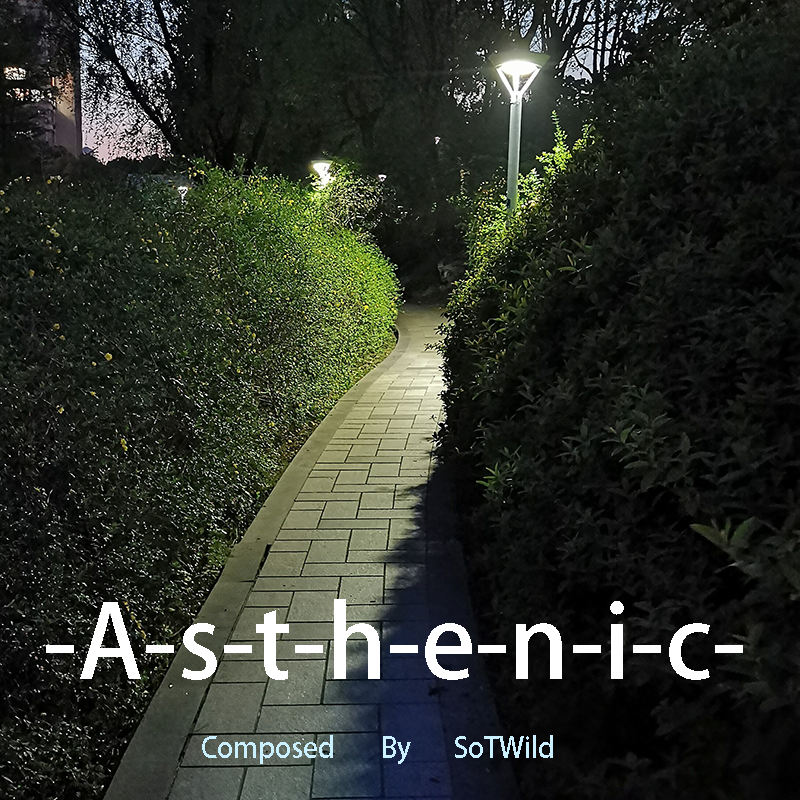
<style>
.page{position:relative;width:800px;height:800px}
.page>*{position:absolute;margin:0}
.t1{font:100px "MyriadPro-Regular";color:#ffffff}
.t2{font:28px "MyriadPro-Regular";color:#cbf0ff}
</style>
<div class="page">
<p class="t1" style="left:46px;top:599px;width:697px;height:81px">-A-s-t-h-e-n-i-c-</p>
<p class="t2" style="left:202px;top:735px;width:351px;height:29px">Composed  By  SoTWild</p>
</div>
